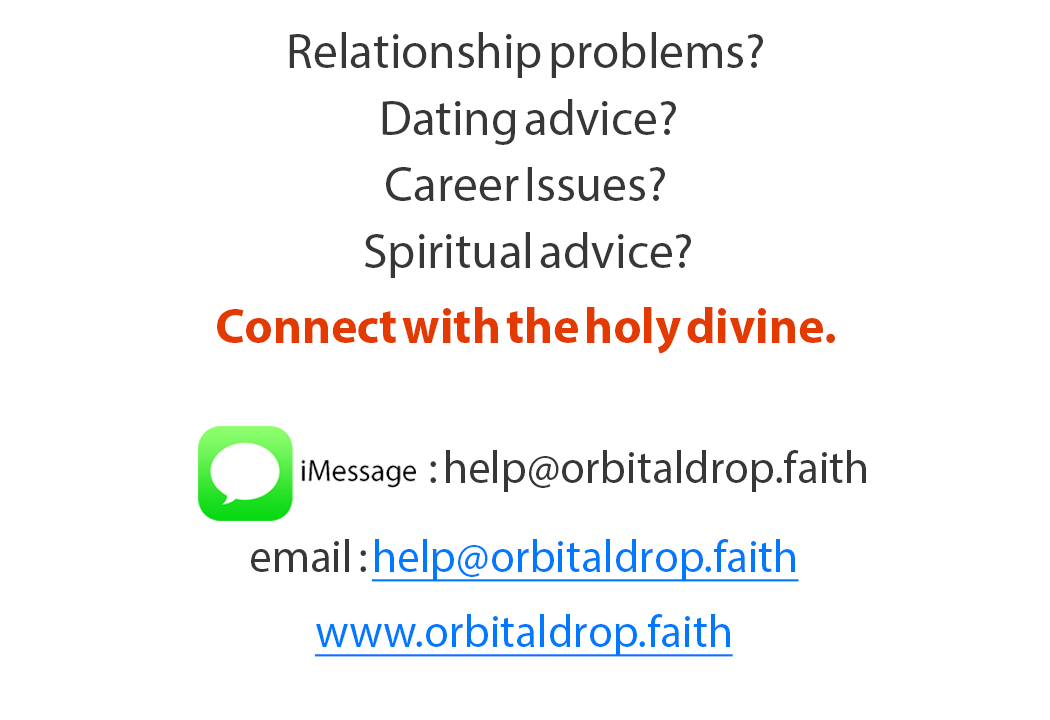
<style>
.page{position:relative;width:1050px;height:720px;background:#ffffff}
.page>*{position:absolute;margin:0}
.t1{font:50px/66.7px "MyriadPro-Regular";color:#373737}
.t2{font:50px/75px "MyriadPro-Bold";color:#e23a00}
.t3{font:45.8px "MyriadPro-Regular";color:#373737}
.t4{font:45.8px "MyriadPro-Regular";color:#0078ff;text-decoration:underline}
</style>
<div class="page">
<p class="t1" style="left:217px;top:32px;width:618px;height:322px;text-align:center">Relationship problems?<br> Dating advice?<br>Career Issues?<br> Spiritual advice?<br><span class="t2">Connect with the holy divine.</span></p>
<p class="t3" style="left:430px;top:450px;width:436px;height:42px">: help@orbitaldrop.faith</p>
<p class="t4" style="left:251px;top:539px;width:548px;height:43px"><span class="t3">email : </span>help@orbitaldrop.faith</p>
<p class="t4" style="left:314px;top:614px;width:419px;height:43px">www.orbitaldrop.faith</p>
</div>
